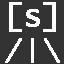
<style>
.page{position:relative;width:64px;height:64px;background:#333333}
.page>*{position:absolute;margin:0}
.t1{font:30px/36px "Monaco";color:#ffffff;font-weight:bold}
</style>
<div class="page">
<p class="t1" style="left:5px;top:2px;width:55px;height:61px">[s]<br>/|\</p>
</div>
